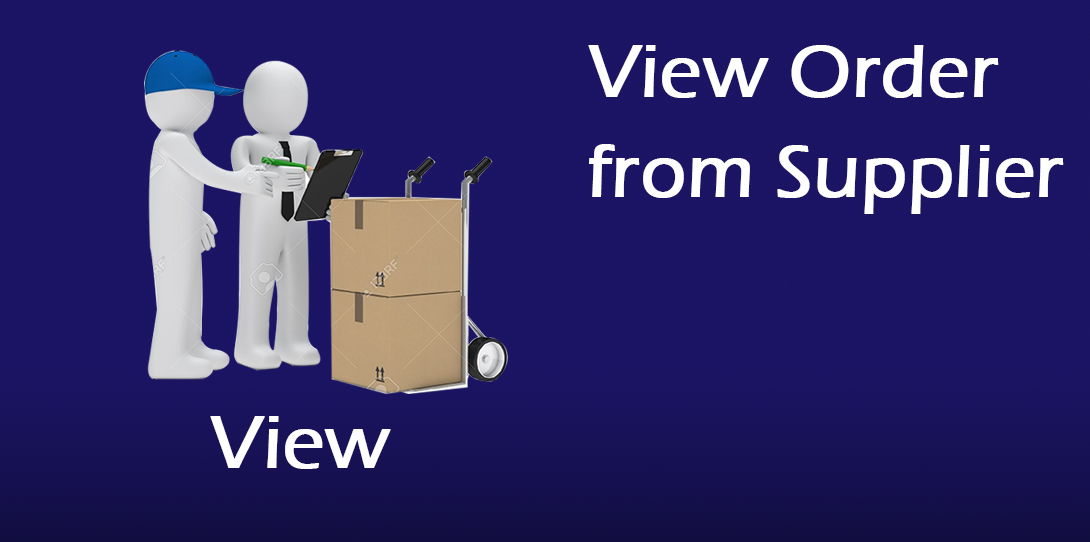
<style>
.page{position:relative;width:1090px;height:542px;background:#1b1464}
.page>*{position:absolute;margin:0}
.t1{font:76.3px/100px "ErasITC-Medium";color:#ffffff;font-weight:bold}
.t2{font:76.2px "ErasITC-Medium";color:#ffffff;font-weight:bold}
</style>
<div class="page">
<p class="t1" style="left:588px;top:45px;width:476px;height:169px">View Order <br>from Supplier</p>
<p class="t2" style="left:210px;top:416px;width:181px;height:53px">View</p>
</div>
